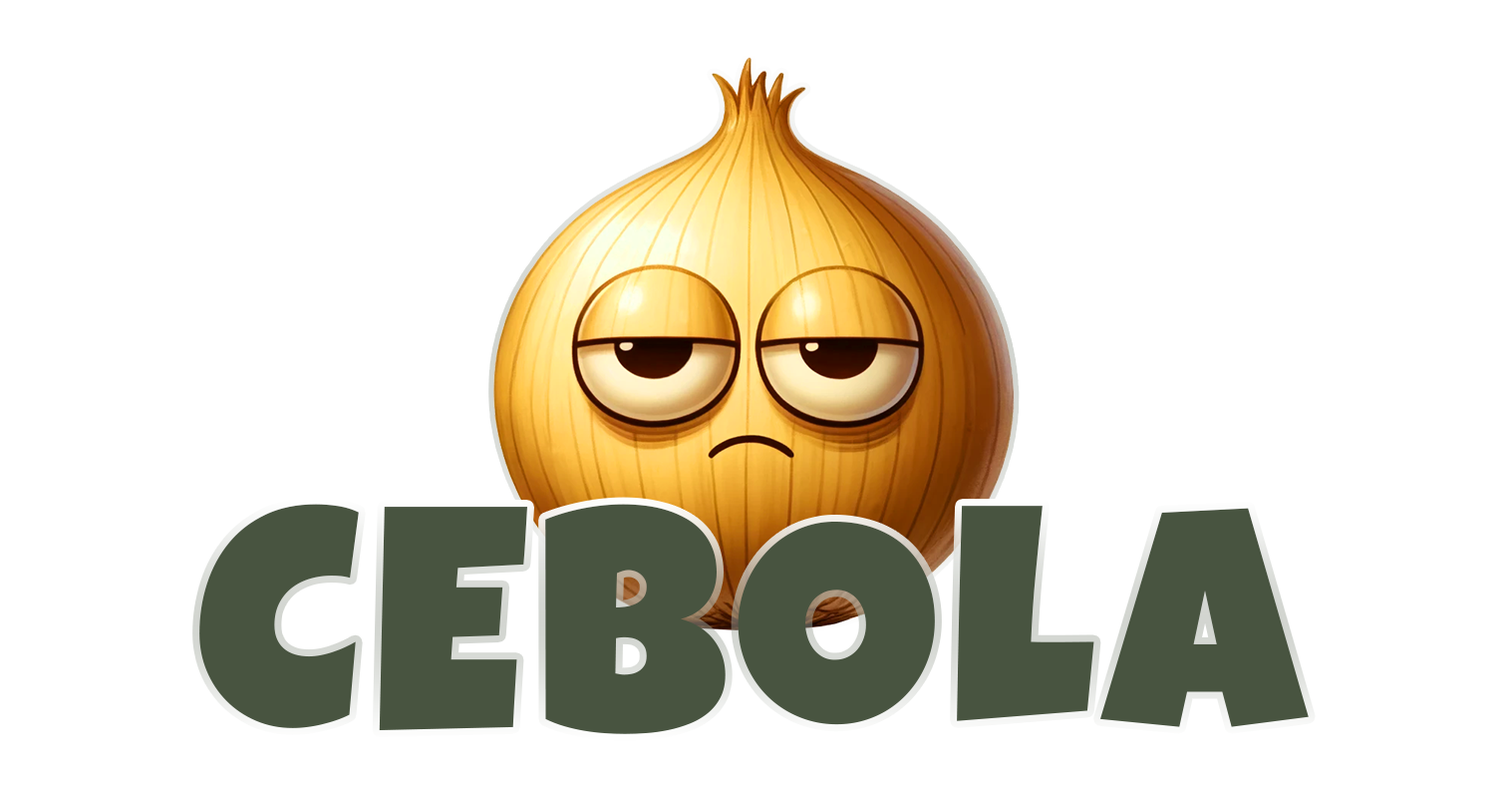
<style>
.page{position:relative;width:1508px;height:791px;background:#ffffff}
.page>*{position:absolute;margin:0}
.t1{font:316.9px "LuckiestGuy-Regular";letter-spacing:0.04em;color:#4c5844}
</style>
<div class="page">
<p class="t1" style="left:199px;top:503px;width:1110px;height:231px">CEBOLA</p>
</div>
